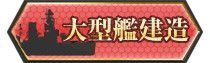
<style>
.page{position:relative;width:210px;height:63px}
.page>*{position:absolute;margin:0}
.t1{font:26px "RyuminPro-ExBold";letter-spacing:-0.025em}
</style>
<div class="page">
<p class="t1" style="left:62px;top:17px;width:127px;height:25px">大型艦建造</p>
</div>
